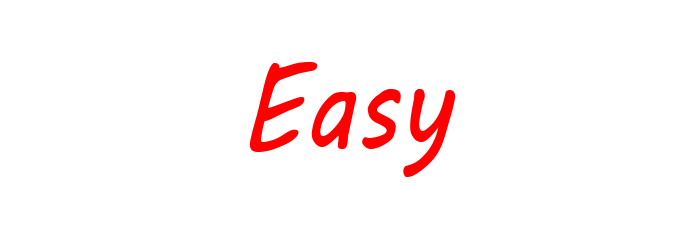
<style>
.page{position:relative;width:700px;height:250px;background:#ffffff}
.page>*{position:absolute;margin:0}
.t1{font:125px "MVBoli";color:#ff0000;scale:0.84 1}
</style>
<div class="page">
<p class="t1" style="left:249px;top:62px;width:207px;height:115px">Easy</p>
</div>
